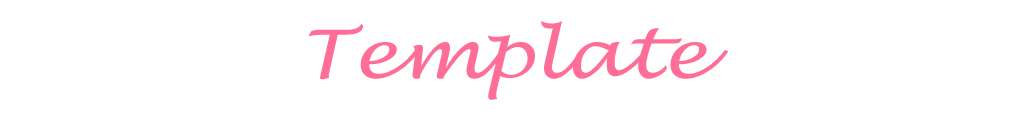
<style>
.page{position:relative;width:1024px;height:120px;background:#ffffff}
.page>*{position:absolute;margin:0}
.t1{font:66.7px "LucidaHandwriting-Italic";color:#ff6e96;scale:1.19 1}
</style>
<div class="page">
<p class="t1" style="left:308px;top:21px;width:421px;height:79px">Template</p>
</div>
